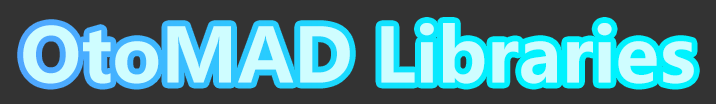
<style>
.page{position:relative;width:716px;height:104px;background:#333333}
.page>*{position:absolute;margin:0}
.t1{font:74.5px "MicrosoftYaHei-Bold";color:#cffdff}
</style>
<div class="page">
<p class="t1" style="left:23px;top:23px;width:671px;height:61px">OtoMAD Libraries</p>
</div>
